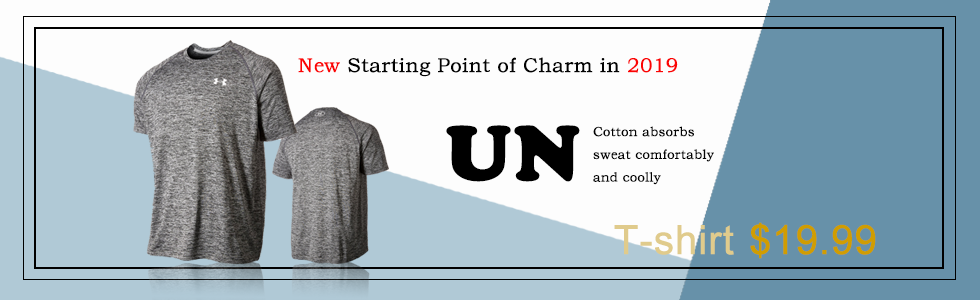
<style>
.page{position:relative;width:980px;height:300px;background:#fdfdfd}
.page>*{position:absolute;margin:0}
.t1{font:20px "STZhongsong";color:#020202;font-weight:bold}
.t2{font:20px "STZhongsong";color:#fb0404;font-weight:bold}
.t3{font:80px "CooperBlack";color:#000000;font-weight:bold}
.t4{font:13px "STZhongsong";color:#020202;font-weight:bold}
.t5{font:40px "ArialMT";color:#d09d01;font-weight:bold}
.t6{font:40px "ArialMT";color:#e0cb8c;font-weight:bold}
</style>
<div class="page">
<p class="t1" style="left:298px;top:57px;width:380px;height:20px"><span class="t2">New</span> Starting Point of Charm in <span class="t2">2019</span></p>
<p class="t3" style="left:446px;top:125px;width:134px;height:57px">UN</p>
<p class="t4" style="left:593px;top:126px;width:121px;height:59px">Cotton absorbs sweat comfortably and coolly</p>
<p class="t5" style="left:750px;top:222px;width:126px;height:37px">$19.99</p>
<p class="t6" style="left:614px;top:225px;width:120px;height:30px">T-shirt</p>
</div>
